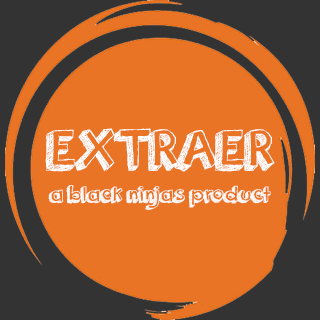
<style>
.page{position:relative;width:320px;height:320px;background:#e97425}
.page>*{position:absolute;margin:0}
.t1{font:58.3px "orangejuice";color:#ffffff}
.t2{font:25px "orangejuice";color:#ffffff}
</style>
<div class="page">
<p class="t1" style="left:45px;top:128px;width:230px;height:44px">EXTRAER</p>
<p class="t2" style="left:48px;top:185px;width:223px;height:25px">a black ninjas product</p>
</div>
